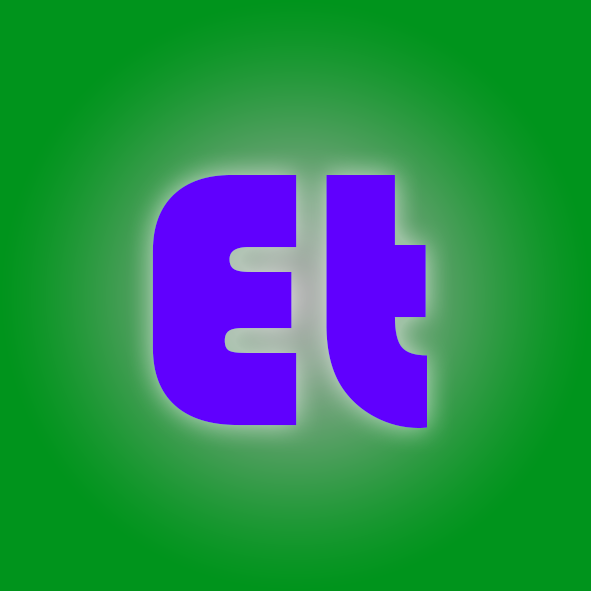
<style>
.page{position:relative;width:591px;height:591px;background:#00941c}
.page>*{position:absolute;margin:0}
.t1{font:375px "Bauhaus93";color:#6000fe}
</style>
<div class="page">
<p class="t1" style="left:152px;top:175px;width:275px;height:253px">Et</p>
</div>
